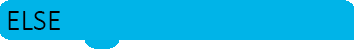
<style>
.page{position:relative;width:354px;height:49px;background:#00b4e8}
.page>*{position:absolute;margin:0}
.t1{font:30px "Calibri-Light";color:#000000}
</style>
<div class="page">
<p class="t1" style="left:8px;top:11px;width:52px;height:19px">ELSE</p>
</div>
